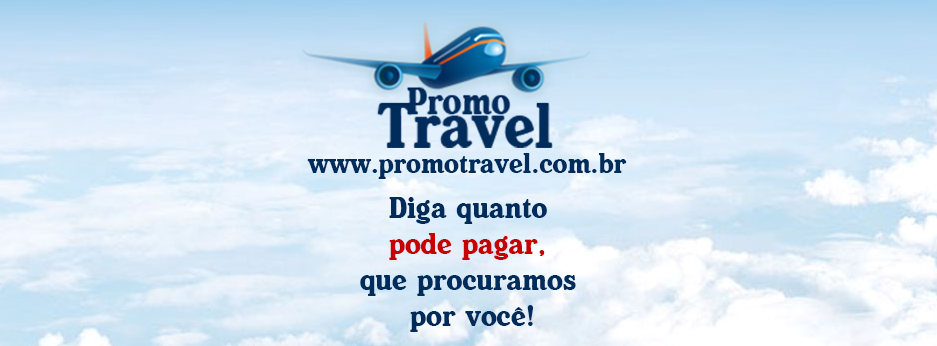
<style>
.page{position:relative;width:937px;height:346px}
.page>*{position:absolute;margin:0}
.t1{font:28px "Heineken";color:#002c5c}
.t2{font:30px "Heineken";color:#002c5c}
.t3{font:30px "Heineken";color:#c60000}
</style>
<div class="page">
<p class="t1" style="left:307px;top:153px;width:320px;height:26px">www.promotravel.com.br</p>
<p class="t2" style="left:360px;top:197px;width:216px;height:135px;text-align:center">Diga quanto <br><span class="t3">pode pagar,</span> <br>que procuramos <br>por você!</p>
</div>
